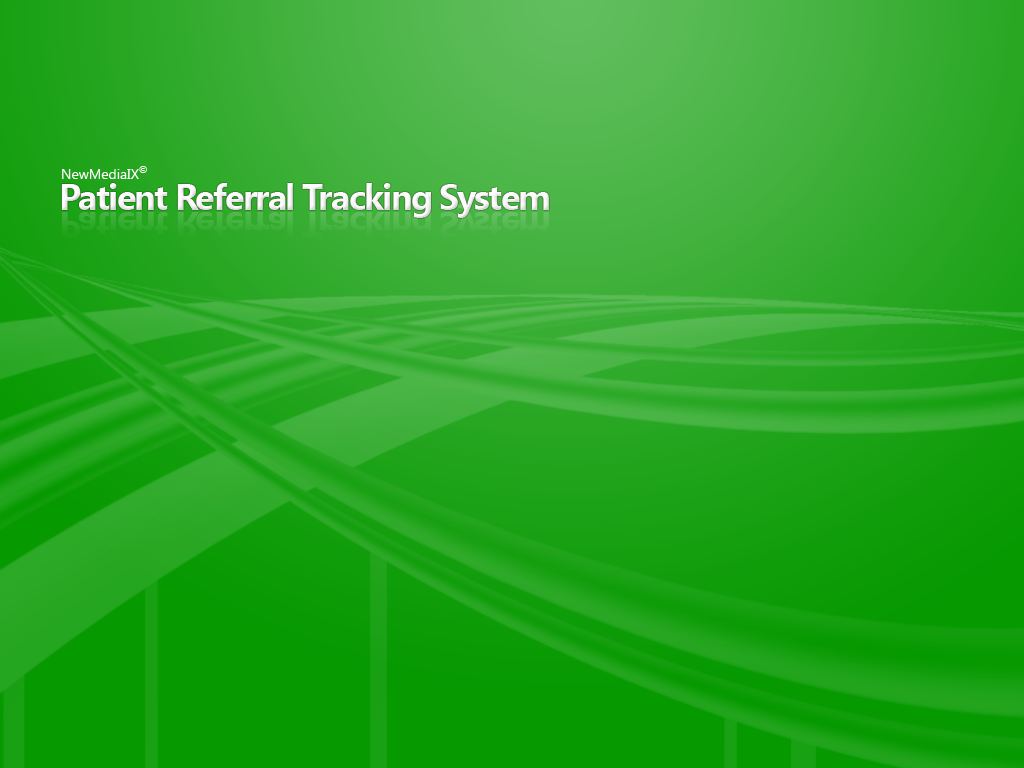
<style>
.page{position:relative;width:1024px;height:768px}
.page>*{position:absolute;margin:0}
.t1{font:14px "SegoeUI";letter-spacing:-0.005em;color:#fdfbfb}
.t2{font:18px "SegoeUI";letter-spacing:-0.005em;color:#fdfbfb}
.t3{font:36px "SegoeUI-Bold";letter-spacing:-0.05em;color:#fdfbfb}
</style>
<div class="page">
<p class="t1" style="left:62px;top:166px;width:85px;height:13px">NewMediaIX<span class="t2">©</span></p>
<p class="t3" style="left:61px;top:183px;width:488px;height:35px">Patient Referral Tracking System</p>
</div>
